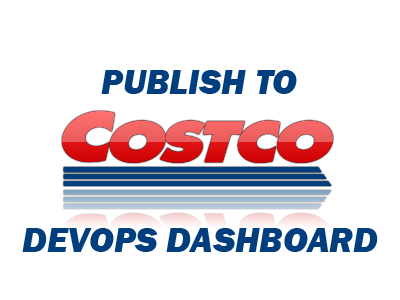
<style>
.page{position:relative;width:400px;height:300px;background:#ffffff}
.page>*{position:absolute;margin:0}
.t1{font:36px "FranklinGothic-HeavyItalic";color:#003e7e}
</style>
<div class="page">
<p class="t1" style="left:101px;top:70px;width:196px;height:24px">PUBLISH TO</p>
<p class="t1" style="left:22px;top:228px;width:356px;height:24px">DEVOPS DASHBOARD</p>
</div>
